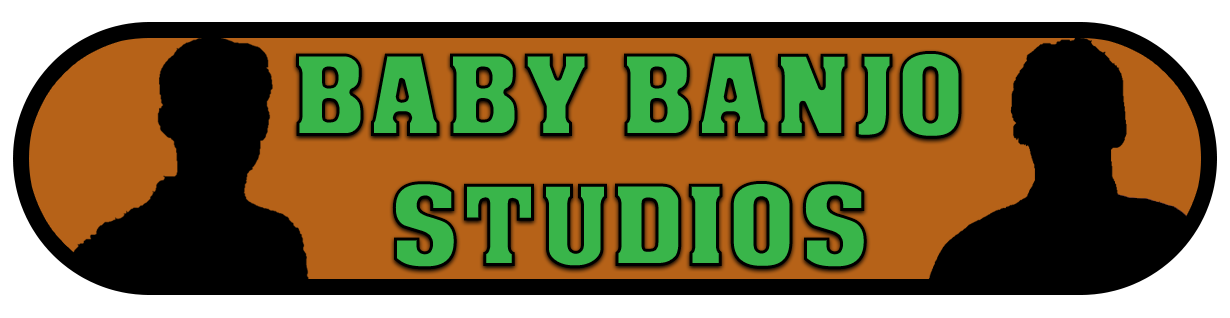
<style>
.page{position:relative;width:1230px;height:318px;background:#000000}
.page>*{position:absolute;margin:0}
.t1{font:108.3px "AcmeFont";color:#39b54a}
</style>
<div class="page">
<p class="t1" style="left:296px;top:51px;width:666px;height:219px;text-align:center">BABY BANJO<br>STUDIOS</p>
</div>
